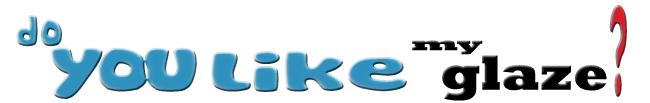
<style>
.page{position:relative;width:650px;height:103px;background:#ffffff}
.page>*{position:absolute;margin:0}
.t1{font:125.7px "Cookies";scale:0.28 1}
.t2{font:42.5px "Cookies"}
.t3{font:19.5px "Rockwell-ExtraBold";color:#000000;scale:2.03 1}
.t4{font:70.2px "Cookies";letter-spacing:-0.1em;color:#3191bd;scale:1.39 1}
.t5{font:55.3px "Cookies";letter-spacing:-0.025em;scale:2.03 1}
.t6{font:50.2px "Rockwell-ExtraBold";color:#000000}
</style>
<div class="page">
<p class="t1" style="left:609px;top:5px;width:18px;height:92px">?</p>
<p class="t2" style="left:16px;top:15px;width:46px;height:32px">do</p>
<p class="t3" style="left:412px;top:40px;width:71px;height:15px">my</p>
<p class="t4" style="left:50px;top:47px;width:147px;height:52px">you</p>
<p class="t5" style="left:211px;top:51px;width:196px;height:41px">like</p>
<p class="t6" style="left:442px;top:55px;width:165px;height:46px">glaze</p>
</div>
